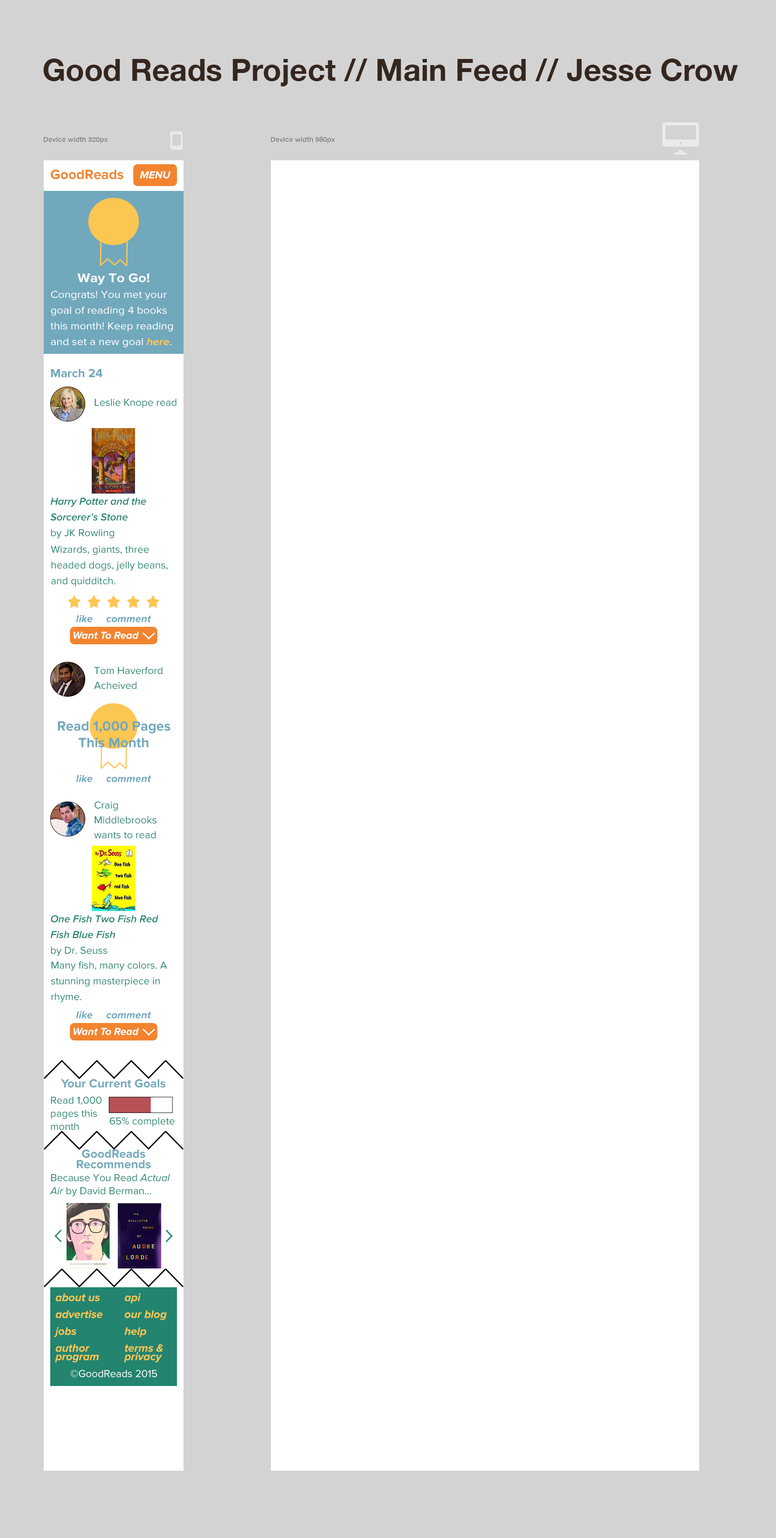
<style>
.page{position:relative;width:776px;height:1538px;background:#ffffff}
.page>*{position:absolute;margin:0}
.t1{font:30.6px "HelveticaNeue-Bold";color:#35271e}
.t2{font:7px "HelveticaNeue-Bold";color:#878787}
.t3{font:14px "ProximaNova-Bold";color:#f2842f}
.t4{font:10.5px "ProximaNova-BoldIt";color:#ffffff}
.t5{font:10.5px/15.7px "ProximaNova-Regular";color:#ffffff;scale:1.07 1}
.t6{font:13px/9.8px "ProximaNova-Bold";color:#fefefe;scale:1.07 1}
.t7{font:10.5px/15.7px "ProximaNova-BoldIt";color:#fcc652;scale:1.07 1}
.t8{font:12.2px "ProximaNova-Bold";color:#71a8bc}
.t9{font:10.5px "ProximaNova-Regular";color:#23846f}
.t10{font:10.5px/15.7px "ProximaNova-SemiboldIt";color:#23846f}
.t11{font:10.5px/15.7px "ProximaNova-Regular";color:#23846f}
.t12{font:10.5px "ProximaNova-BoldIt";color:#71a8bc}
.t13{font:10.5px/14.8px "ProximaNova-Regular";color:#23846f}
.t14{font:14px/16.6px "ProximaNova-Bold";color:#71a8bc}
.t15{font:10.5px/13.1px "ProximaNova-Regular";color:#23846f}
.t16{font:12.2px/10.5px "ProximaNova-Bold";color:#71a8bc}
.t17{font:10.5px/13.1px "ProximaNova-RegularIt";color:#23846f}
.t18{font:11.2px/16.9px "ProximaNova-BoldIt";color:#fcc652}
.t19{font:11.2px/8.6px "ProximaNova-BoldIt";color:#fcc652}
.t20{font:10.5px "ProximaNova-Regular";color:#ffffff}
</style>
<div class="page">
<p class="t1" style="left:43px;top:59px;width:695px;height:27px">Good Reads Project // Main Feed // Jesse Crow</p>
<p class="t2" style="left:44px;top:137px;width:64px;height:6px">Device width 320px</p>
<p class="t2" style="left:271px;top:137px;width:64px;height:6px">Device width 980px</p>
<p class="t3" style="left:51px;top:169px;width:73px;height:10px">GoodReads</p>
<p class="t4" style="left:140px;top:171px;width:31px;height:8px">MENU</p>
<p class="t5" style="left:50px;top:273px;width:123px;height:74px;text-align:center"><span class="t6">Way To Go!<br></span>Congrats! You met your goal of reading 4 books this month! Keep reading and set a new goal <span class="t7">here</span>.</p>
<p class="t8" style="left:51px;top:369px;width:52px;height:8px">March 24</p>
<p class="t9" style="left:95px;top:399px;width:81px;height:9px">Leslie Knope read</p>
<p class="t10" style="left:50px;top:497px;width:96px;height:41px">Harry Potter and the <br>Sorcerer’s Stone <br><span class="t11">by JK Rowling</span></p>
<p class="t11" style="left:51px;top:545px;width:117px;height:41px">Wizards, giants, three headed dogs, jelly beans, and quidditch.</p>
<p class="t12" style="left:76px;top:614px;width:75px;height:8px">like     comment</p>
<p class="t4" style="left:73px;top:631px;width:66px;height:8px">Want To Read</p>
<p class="t13" style="left:94px;top:666px;width:68px;height:23px">Tom Haverford Acheived</p>
<p class="t14" style="left:58px;top:721px;width:112px;height:26px;text-align:center">Read 1,000 Pages This Month</p>
<p class="t12" style="left:76px;top:774px;width:75px;height:8px">like     comment</p>
<p class="t13" style="left:94px;top:801px;width:62px;height:37px">Craig <br>Middlebrooks wants to read</p>
<p class="t10" style="left:50px;top:915px;width:109px;height:41px">One Fish Two Fish Red Fish Blue Fish <br><span class="t11">by Dr. Seuss</span></p>
<p class="t11" style="left:51px;top:961px;width:116px;height:41px">Many fish, many colors. A stunning masterpiece in rhyme.</p>
<p class="t12" style="left:76px;top:1010px;width:75px;height:8px">like     comment</p>
<p class="t4" style="left:73px;top:1028px;width:66px;height:7px">Want To Read</p>
<p class="t8" style="left:61px;top:1079px;width:105px;height:8px">Your Current Goals</p>
<p class="t15" style="left:51px;top:1096px;width:51px;height:34px">Read 1,000 pages this month</p>
<p class="t9" style="left:110px;top:1117px;width:65px;height:9px">65% complete</p>
<p class="t16" style="left:76px;top:1149px;width:75px;height:19px;text-align:center">GoodReads <br>Recommends</p>
<p class="t15" style="left:50px;top:1174px;width:120px;height:22px">Because You Read <span class="t17">Actual Air</span> by David Berman...</p>
<p class="t18" style="left:54px;top:1293px;width:49px;height:69px">about us<br>advertise<br>jobs<br>author <span class="t19">program</span></p>
<p class="t18" style="left:124px;top:1293px;width:43px;height:69px">api<br>our blog<br>help<br>terms &amp; <span class="t19">privacy</span></p>
<p class="t20" style="left:70px;top:1369px;width:87px;height:8px">©GoodReads 2015</p>
</div>
